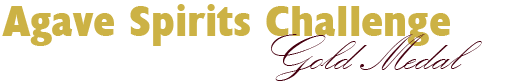
<style>
.page{position:relative;width:507px;height:84px;background:#ffffff}
.page>*{position:absolute;margin:0}
.t1{font:43.5px "Humanist521BT-XtraBoldCondensed";color:#ccb245;scale:1.05 1}
.t2{font:52.2px "KunstlerScript";color:#460010;scale:1.05 1}
</style>
<div class="page">
<p class="t1" style="left:2px;top:4px;width:448px;height:42px">Agave Spirits Challenge</p>
<p class="t2" style="left:271px;top:34px;width:211px;height:47px">Gold Medal</p>
</div>
